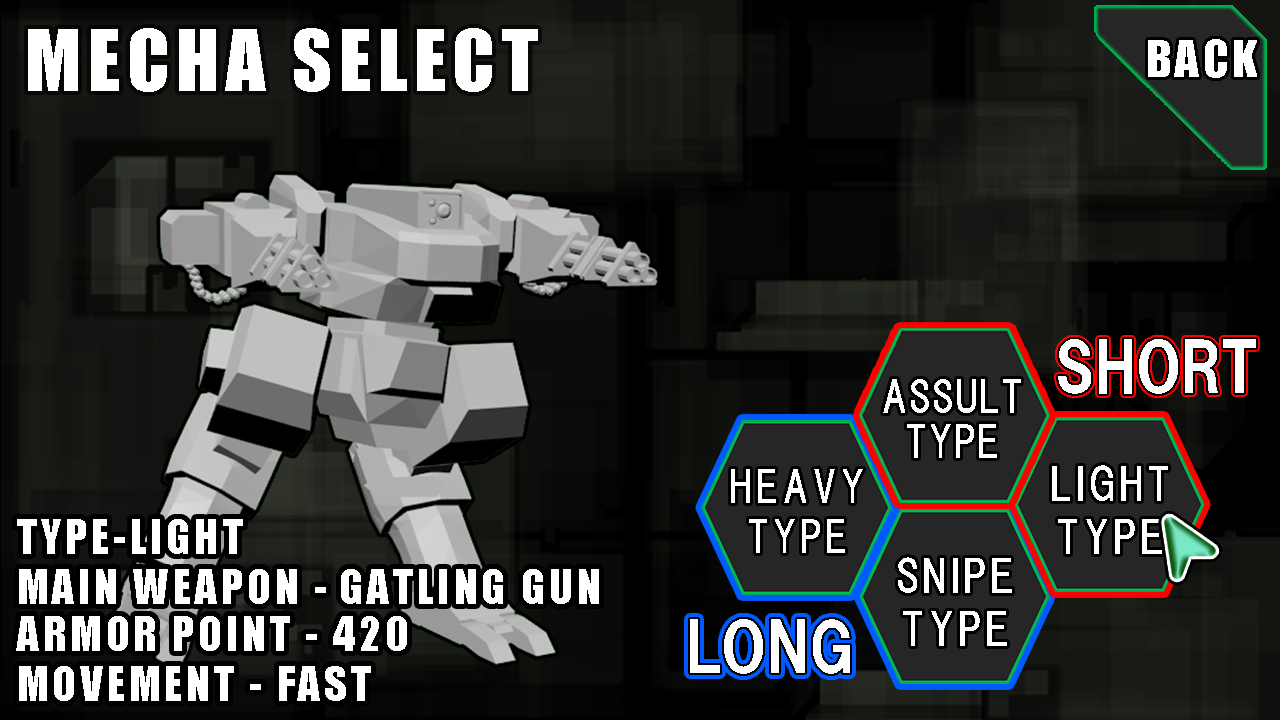
<style>
.page{position:relative;width:1280px;height:720px}
.page>*{position:absolute;margin:0}
.t1{font:78.3px "Impact";letter-spacing:0.08em;color:#ffffff}
.t2{font:46.8px "Impact";letter-spacing:0.08em;color:#ffffff}
.t3{font:67.1px "HGSSoeiKakugothicUB";color:#ffffff}
.t4{font:41.7px/44.4px "HGPGothicE";letter-spacing:0.025em;color:#ffffff;scale:0.94 1}
.t5{font:41.7px "HGPGothicE";letter-spacing:0.08em;color:#ffffff;scale:0.94 1}
.t6{font:44.4px "HGPGothicE";letter-spacing:0.08em;color:#ffffff;scale:0.94 1}
.t7{font:44.4px "Impact";letter-spacing:0.08em;color:#ffffff}
</style>
<div class="page">
<p class="t1" style="left:28px;top:28px;width:510px;height:64px">MECHA SELECT</p>
<p class="t2" style="left:1148px;top:39px;width:109px;height:39px">BACK</p>
<p class="t3" style="left:1058px;top:339px;width:198px;height:55px">SHORT</p>
<p class="t4" style="left:883px;top:379px;width:138px;height:79px;text-align:center">ASSULT<br>TYPE</p>
<p class="t5" style="left:731px;top:469px;width:132px;height:84px;text-align:center">HEAVY<br>TYPE</p>
<p class="t6" style="left:1052px;top:465px;width:116px;height:89px;text-align:center">LIGHT<br>TYPE</p>
<p class="t7" style="left:17px;top:519px;width:226px;height:35px">TYPE-LIGHT</p>
<p class="t6" style="left:898px;top:557px;width:114px;height:89px;text-align:center">SNIPE<br>TYPE</p>
<p class="t7" style="left:19px;top:569px;width:307px;height:35px">MAIN WEAPON -</p>
<p class="t7" style="left:341px;top:569px;width:258px;height:35px">GATLING GUN</p>
<p class="t7" style="left:16px;top:616px;width:391px;height:35px">ARMOR POINT - 420</p>
<p class="t3" style="left:690px;top:619px;width:160px;height:55px">LONG</p>
<p class="t7" style="left:19px;top:666px;width:352px;height:35px">MOVEMENT - FAST</p>
</div>
